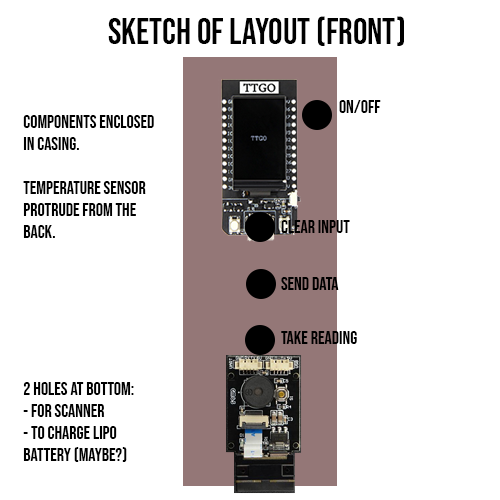
<style>
.page{position:relative;width:500px;height:500px;background:#ffffff}
.page>*{position:absolute;margin:0}
.t1{font:36px "BebasNeue-Regular";color:#000000}
.t2{font:18px "BebasNeue-Regular";color:#000000}
.t3{font:18px/22px "BebasNeue-Regular";color:#000000}
</style>
<div class="page">
<p class="t1" style="left:108px;top:16px;width:296px;height:30px">Sketch of Layout (Front)</p>
<p class="t2" style="left:339px;top:100px;width:42px;height:13px">On/OFF</p>
<p class="t3" style="left:23px;top:115px;width:131px;height:123px">Components enclosed<br>in casing.<br><br>Temperature Sensor protrude from the back.</p>
<p class="t2" style="left:281px;top:220px;width:69px;height:13px">Clear Input</p>
<p class="t2" style="left:281px;top:277px;width:58px;height:13px">Send Data</p>
<p class="t2" style="left:281px;top:331px;width:76px;height:13px">Take Reading</p>
<p class="t3" style="left:23px;top:382px;width:111px;height:80px">2 Holes at bottom:<br>- For Scanner<br>- To charge lipo <br>battery (Maybe?)</p>
</div>
